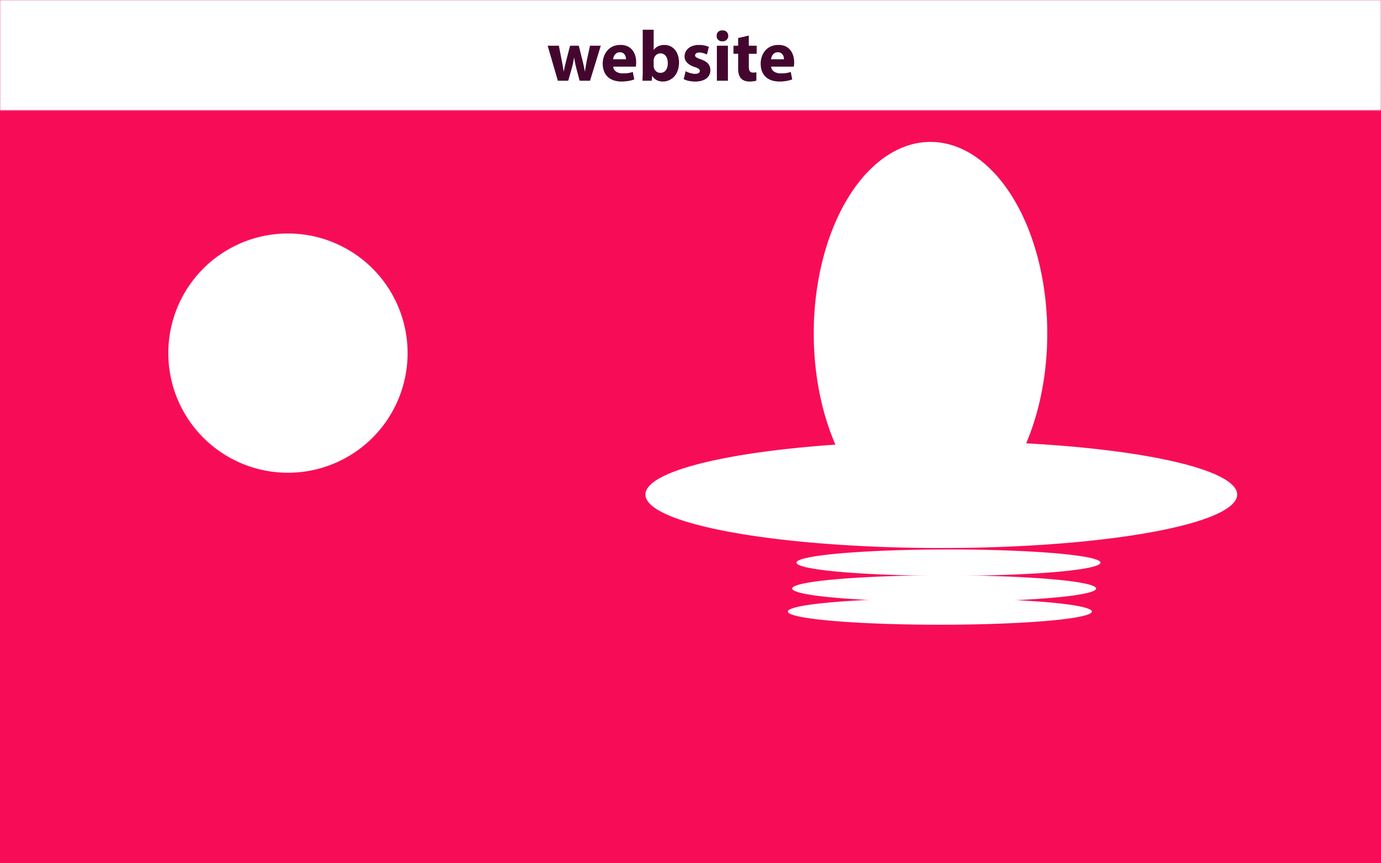
<style>
.page{position:relative;width:1381px;height:863px;background:#f70d57}
.page>*{position:absolute;margin:0}
.t1{font:71.9px "MyriadPro-Bold";color:#44062f}
</style>
<div class="page">
<p class="t1" style="left:548px;top:30px;width:247px;height:52px">website</p>
</div>
